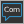
<style>
.page{position:relative;width:24px;height:24px;background:#333333}
.page>*{position:absolute;margin:0}
.t1{font:7.2px "DejaVuSans"}
</style>
<div class="page">
<p class="t1" style="left:4px;top:6px;width:16px;height:6px">Com</p>
</div>
